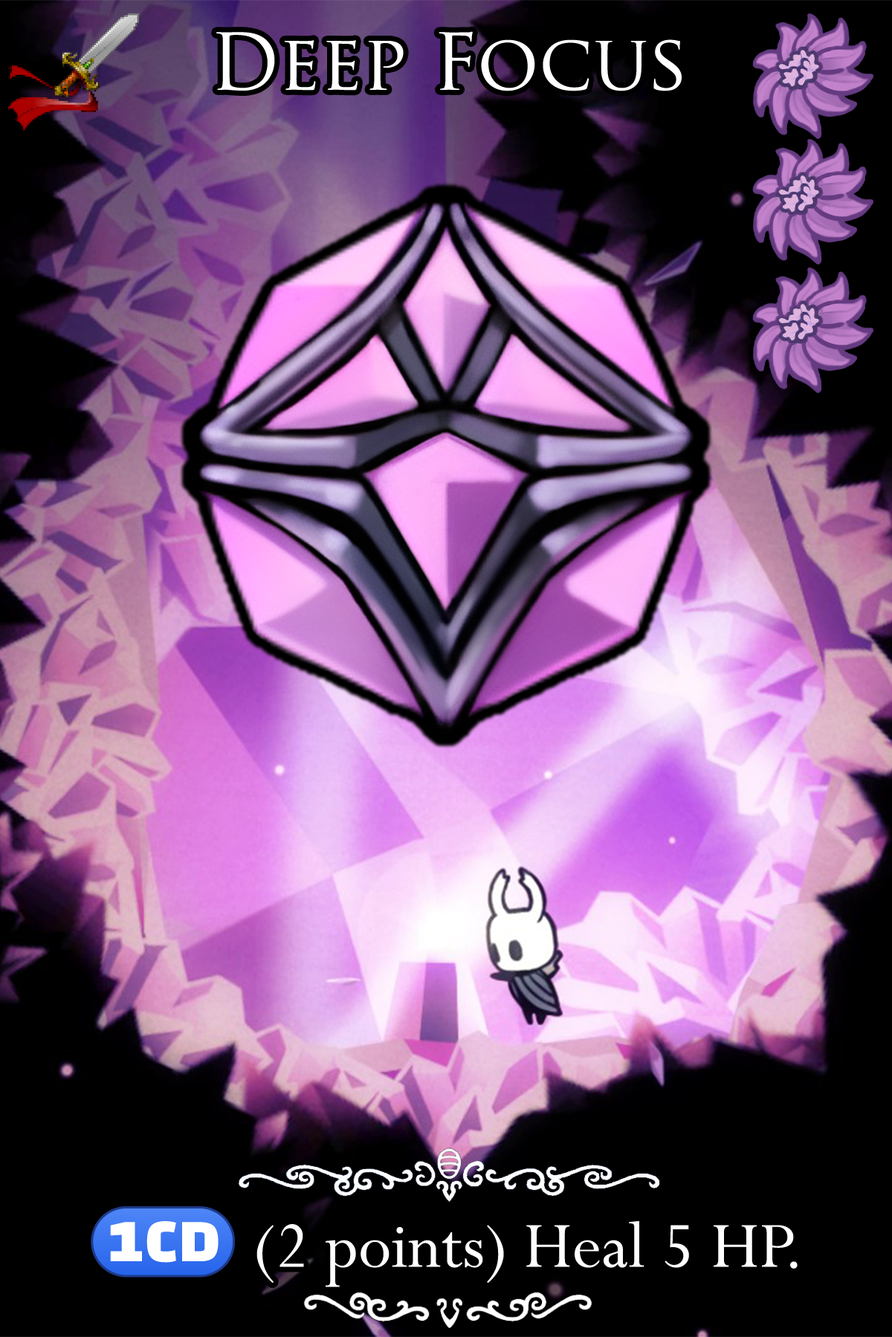
<style>
.page{position:relative;width:892px;height:1337px;background:#000000}
.page>*{position:absolute;margin:0}
.t1{font:130.8px "TrajanPro-Regular";color:#ffffff}
.t2{font:124.1px "Perpetua"}
.t3{font:124.1px "stoogedings-Regular";letter-spacing:0.225em}
</style>
<div class="page">
<p class="t1" style="left:216px;top:31px;width:465px;height:60px">Deep Focus</p>
<p class="t2" style="left:91px;top:1207px;width:706px;height:81px"><span class="t3">(1CD)</span>(2 points) Heal 5 HP.</p>
</div>
